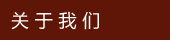
<style>
.page{position:relative;width:170px;height:40px;background:#601606}
.page>*{position:absolute;margin:0}
.t1{font:18px "MicrosoftYaHei";letter-spacing:0.32em;color:#ffffff}
</style>
<div class="page">
<p class="t1" style="left:11px;top:11px;width:88px;height:19px">关于我们</p>
</div>
